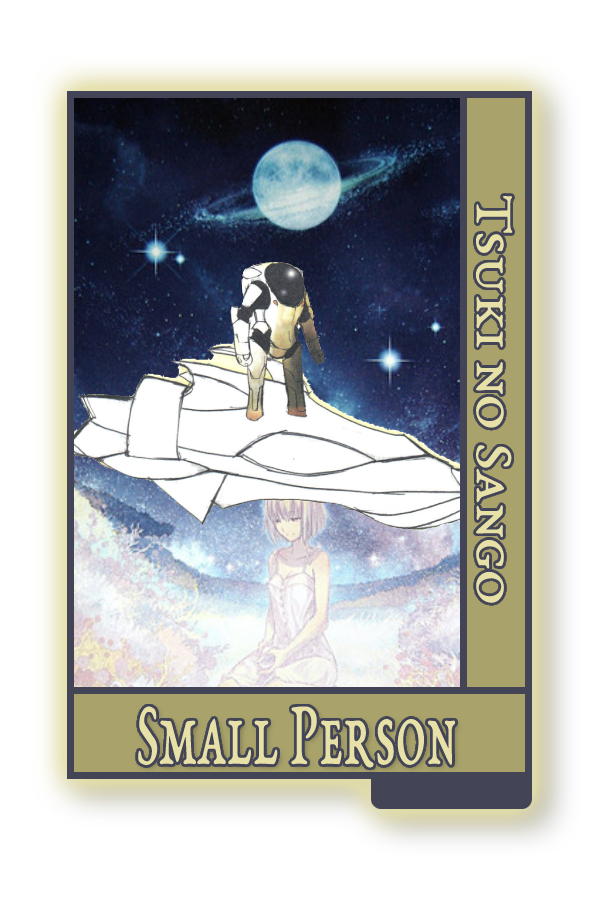
<style>
.page{position:relative;width:600px;height:900px;background:#ffffff}
.page>*{position:absolute;margin:0}
.t1{font:57.9px "EBGaramondSC08-Regular";color:#e7e1a8;scale:1.1 1}
.t2{font:95.8px "EBGaramondSC08-Regular";color:#e7e1a8;scale:0.57 1}
</style>
<div class="page">
<p class="t1" style="left:475px;top:196px;width:38px;height:407px;rotate:90deg">Tsuki no Sango</p>
<p class="t2" style="left:138px;top:706px;width:318px;height:62px">Small Person</p>
</div>
